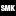
<style>
.page{position:relative;width:16px;height:16px;background:#000000}
.page>*{position:absolute;margin:0}
.t1{font:7.5px "Hill-Bold";color:#ffffff}
</style>
<div class="page">
<p class="t1" style="left:1px;top:5px;width:14px;height:6px">SMK</p>
</div>
